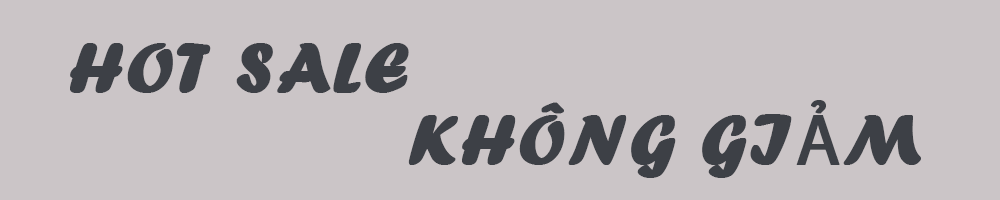
<style>
.page{position:relative;width:1000px;height:200px;background:#cbc5c7}
.page>*{position:absolute;margin:0}
.t1{font:72px "ForteMT";letter-spacing:0.025em;color:#3d4046;text-transform:uppercase;font-weight:bold}
.t2{font:72px "ForteMT";letter-spacing:0.025em;color:#3d4046;font-weight:bold}
.t3{font:72px "MyriadPro-Regular";letter-spacing:0.025em;color:#3d4046;font-weight:bold}
</style>
<div class="page">
<p class="t1" style="left:70px;top:43px;width:339px;height:50px">Hot Sale</p>
<p class="t2" style="left:408px;top:100px;width:513px;height:78px">KHÔNG GI<span class="t3">Ả</span>M</p>
</div>
